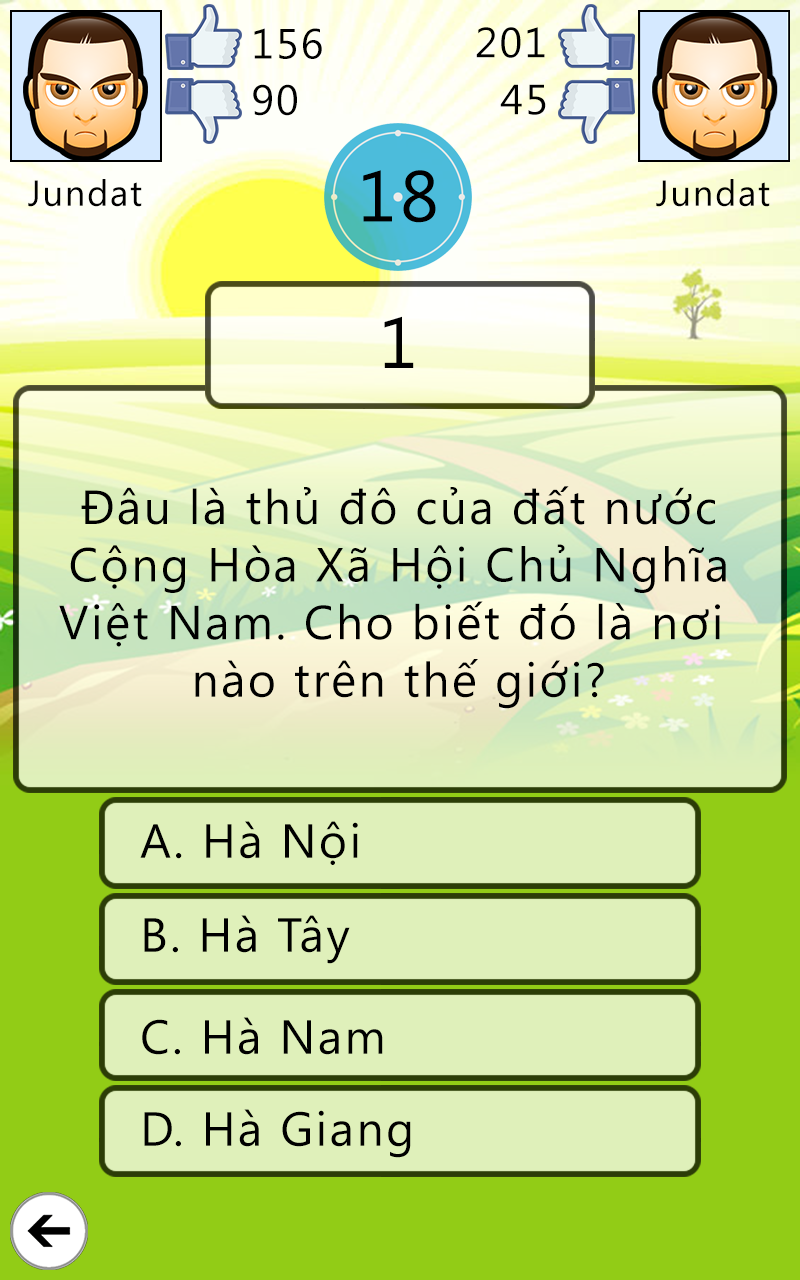
<style>
.page{position:relative;width:800px;height:1280px}
.page>*{position:absolute;margin:0}
.t1{font:42px "SegoeUI";letter-spacing:0.05em;color:#000000}
.t2{font:72px "SegoeUI";letter-spacing:0.05em;color:#000000}
.t3{font:36px "SegoeUI";letter-spacing:0.05em;color:#000000}
.t4{font:48px "SegoeUI";letter-spacing:0.05em;color:#000000}
</style>
<div class="page">
<p class="t1" style="left:254px;top:28px;width:68px;height:31px">156</p>
<p class="t1" style="left:476px;top:27px;width:69px;height:31px">201</p>
<p class="t1" style="left:253px;top:84px;width:44px;height:32px">90</p>
<p class="t1" style="left:500px;top:84px;width:46px;height:31px">45</p>
<p class="t2" style="left:363px;top:170px;width:73px;height:53px">18</p>
<p class="t3" style="left:28px;top:179px;width:114px;height:28px">Jundat</p>
<p class="t3" style="left:656px;top:179px;width:114px;height:28px">Jundat</p>
<p class="t2" style="left:384px;top:316px;width:30px;height:52px">1</p>
<p class="t4" style="left:59px;top:486px;width:667px;height:223px;text-align:center">Đâu là thủ đô của đất nước<br>Cộng Hòa Xã Hội Chủ Nghĩa<br>Việt Nam. Cho biết đó là nơi <br>nào trên thế giới?</p>
<p class="t4" style="left:140px;top:821px;width:218px;height:44px">A. Hà Nội</p>
<p class="t4" style="left:144px;top:915px;width:206px;height:49px">B. Hà Tây</p>
<p class="t4" style="left:142px;top:1017px;width:241px;height:38px">C. Hà Nam</p>
<p class="t4" style="left:144px;top:1109px;width:267px;height:49px">D. Hà Giang</p>
</div>
